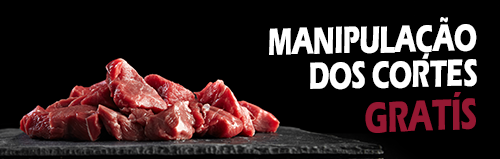
<style>
.page{position:relative;width:500px;height:159px;background:#000000}
.page>*{position:absolute;margin:0}
.t1{font:39.6px/35.2px "ErasITC-Bold";letter-spacing:-0.02em;color:#ffffff;scale:0.67 1}
.t2{font:45px "ErasITC-Bold";letter-spacing:-0.02em;color:#951832;scale:0.67 1}
.t3{font:33.5px "ErasITC-Bold";letter-spacing:-0.02em;color:#ffffff;scale:0.67 1}
</style>
<div class="page">
<p class="t1" style="left:269px;top:17px;width:208px;height:73px;text-align:right;rotate:-1deg">MANIPULAÇÃO <br>DOS CORTES</p>
<p class="t2" style="left:365px;top:92px;width:111px;height:41px;rotate:-2deg"><span class="t3"><br></span>GRATÍS</p>
</div>
